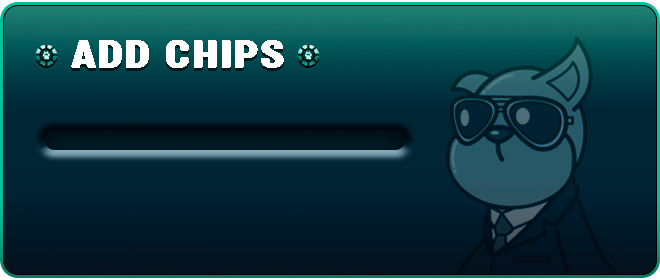
<style>
.page{position:relative;width:660px;height:280px}
.page>*{position:absolute;margin:0}
.t1{font:37.1px "aAkhirTahun";letter-spacing:0.04em;color:#ffffff}
</style>
<div class="page">
<p class="t1" style="left:71px;top:40px;width:213px;height:28px">Add chips</p>
</div>
